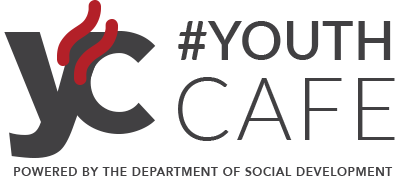
<style>
.page{position:relative;width:400px;height:180px;background:#ffffff}
.page>*{position:absolute;margin:0}
.t1{font:53.3px "Lato-Semibold";color:#414042}
.t2{font:172.9px "Arial-Black";letter-spacing:0.05em;color:#414042}
.t3{font:204.5px "Avenir-Heavy";letter-spacing:0.05em;color:#414042}
.t4{font:85.8px "Lato-Light";letter-spacing:0.05em;color:#414042}
.t5{font:12px "Avenir-Heavy";letter-spacing:0.05em;color:#414042;text-transform:uppercase}
</style>
<div class="page">
<p class="t1" style="left:178px;top:21px;width:213px;height:39px">#YOUTH</p>
<p class="t2" style="left:4px;top:32px;width:104px;height:126px">y</p>
<p class="t3" style="left:66px;top:31px;width:90px;height:103px">c</p>
<p class="t4" style="left:178px;top:77px;width:217px;height:64px">CAFE</p>
<p class="t5" style="left:14px;top:167px;width:379px;height:9px">powered by the department of social development</p>
</div>
